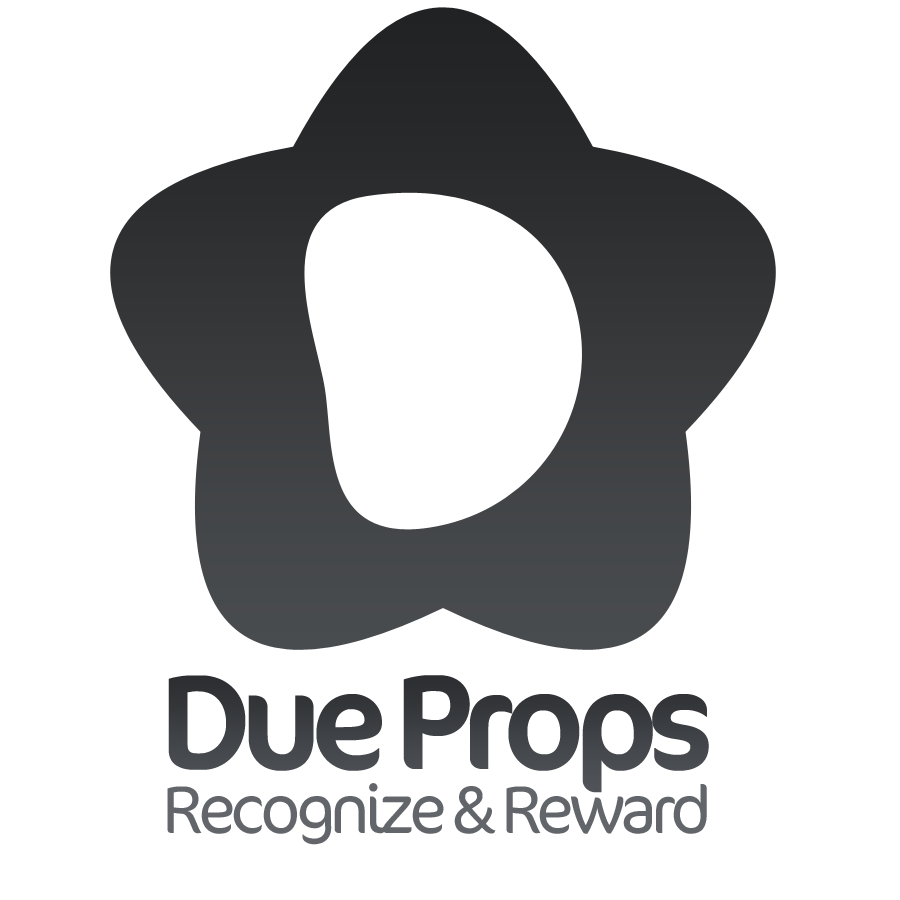
<style>
.page{position:relative;width:900px;height:900px;background:#ffffff}
.page>*{position:absolute;margin:0}
.t1{font:136px "Cocon-Regular";letter-spacing:-0.08em;color:#3e4145}
.t2{font:68px "Cocon-Light";letter-spacing:-0.08em;color:#62656a}
</style>
<div class="page">
<p class="t1" style="left:168px;top:675px;width:541px;height:118px">Due Props</p>
<p class="t2" style="left:167px;top:783px;width:540px;height:62px">Recognize &amp; Reward</p>
</div>
